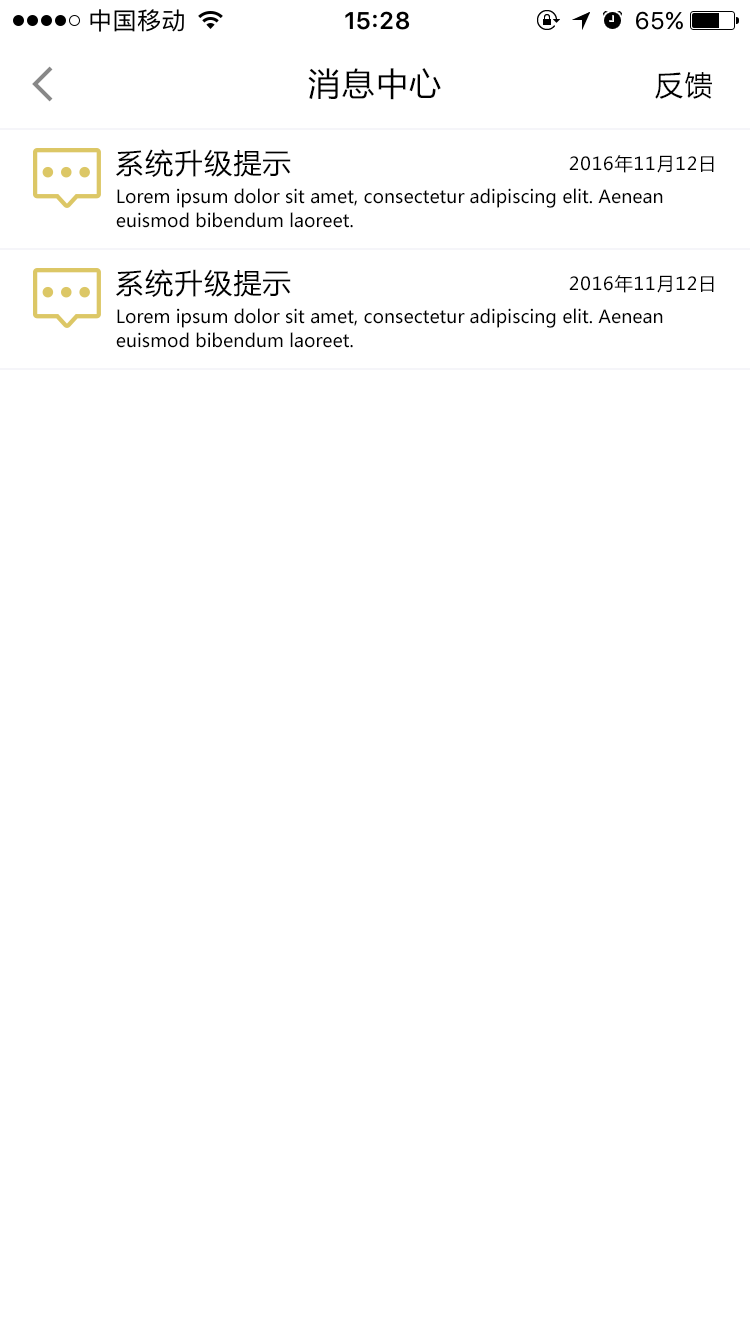
<style>
.page{position:relative;width:750px;height:1334px;background:#ffffff}
.page>*{position:absolute;margin:0}
.t1{font:32px "MicrosoftYaHei";letter-spacing:0.05em;color:#000000}
.t2{font:28px "MicrosoftYaHei";letter-spacing:0.05em;color:#000000}
.t3{font:18px "MicrosoftYaHei";letter-spacing:0.05em;color:#000000}
.t4{font:18px/24px "MicrosoftYaHei";color:#000000}
</style>
<div class="page">
<p class="t1" style="left:308px;top:68px;width:133px;height:32px">消息中心</p>
<p class="t2" style="left:655px;top:72px;width:57px;height:27px">反馈</p>
<p class="t2" style="left:116px;top:149px;width:175px;height:28px">系统升级提示</p>
<p class="t3" style="left:569px;top:155px;width:145px;height:18px">2016年11月12日</p>
<p class="t4" style="left:116px;top:188px;width:547px;height:40px">Lorem ipsum dolor sit amet, consectetur adipiscing elit. Aenean <br>euismod bibendum laoreet.</p>
<p class="t2" style="left:116px;top:269px;width:175px;height:28px">系统升级提示</p>
<p class="t3" style="left:569px;top:275px;width:145px;height:18px">2016年11月12日</p>
<p class="t4" style="left:116px;top:308px;width:547px;height:40px">Lorem ipsum dolor sit amet, consectetur adipiscing elit. Aenean <br>euismod bibendum laoreet.</p>
</div>
